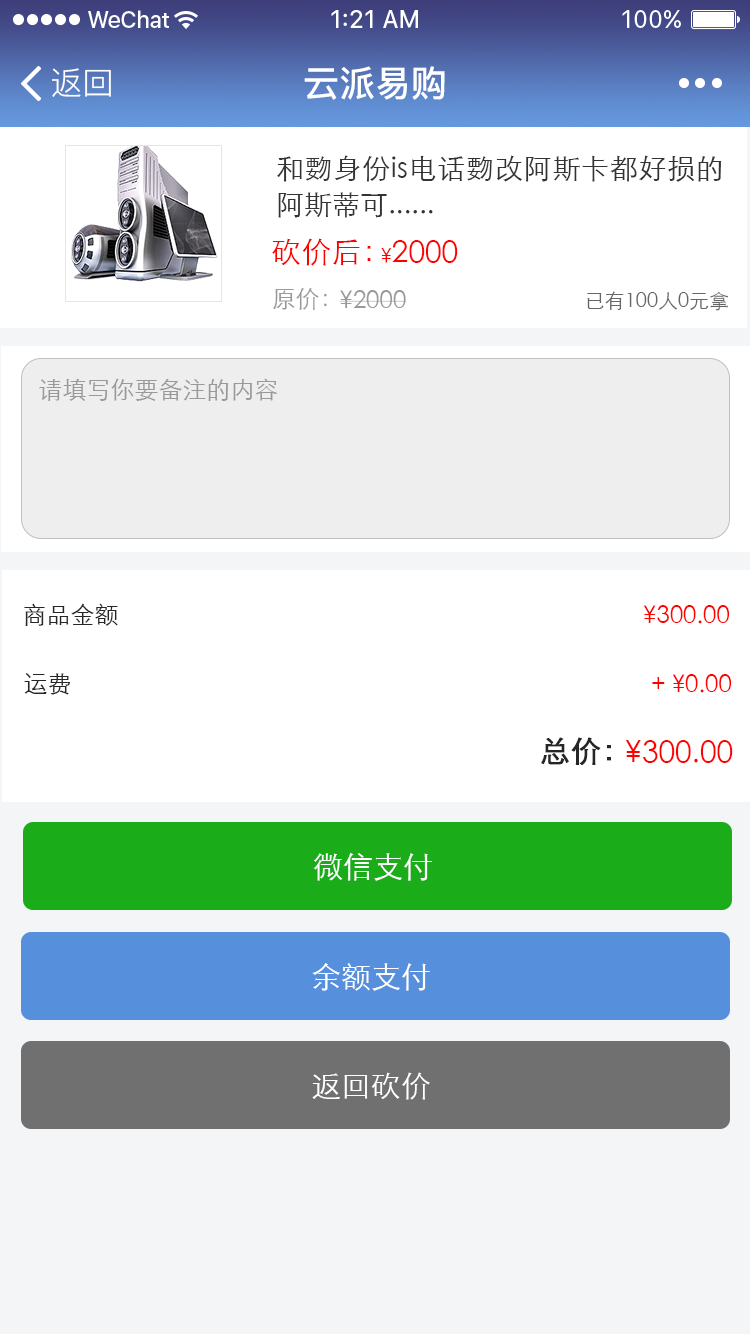
<style>
.page{position:relative;width:750px;height:1334px;background:#ffffff}
.page>*{position:absolute;margin:0}
.t1{font:32px "PingFang-SC-Regular";color:#ffffff}
.t2{font:36px "PingFang-SC-Bold";color:#ffffff}
.t3{font:28px/36px "STXihei";color:#333333}
.t4{font:30px "STXihei";color:#ff0000}
.t5{font:20px "STXihei";color:#ff0000}
.t6{font:24px "STXihei";color:#999999}
.t7{font:20px "STXihei";color:#666666}
.t8{font:24px "STXihei";color:#262626}
.t9{font:24px "STXihei";color:#ff0000}
.t10{font:30px "STXihei";color:#262626;font-weight:bold}
.t11{font:30px "STXihei";color:#ffffff}
</style>
<div class="page">
<p class="t1" style="left:52px;top:68px;width:59px;height:29px">返回</p>
<p class="t2" style="left:304px;top:66px;width:141px;height:34px">云派易购</p>
<p class="t3" style="left:277px;top:155px;width:445px;height:63px;text-align:justify">和覅身份is电话覅改阿斯卡都好损的阿斯蒂可......</p>
<p class="t4" style="left:272px;top:238px;width:99px;height:28px">砍价后：</p>
<p class="t4" style="left:381px;top:240px;width:77px;height:23px"><span class="t5">¥</span>2000</p>
<p class="t6" style="left:273px;top:288px;width:54px;height:22px">原价：</p>
<p class="t6" style="left:339px;top:290px;width:68px;height:18px">¥2000</p>
<p class="t7" style="left:587px;top:291px;width:142px;height:20px">已有100人0元拿</p>
<p class="t6" style="left:39px;top:378px;width:238px;height:23px">请填写你要备注的内容</p>
<p class="t8" style="left:24px;top:603px;width:94px;height:23px">商品金额</p>
<p class="t9" style="left:643px;top:605px;width:87px;height:19px">¥300.00</p>
<p class="t8" style="left:24px;top:673px;width:46px;height:22px">运费</p>
<p class="t9" style="left:652px;top:674px;width:80px;height:19px">+ ¥0.00</p>
<p class="t10" style="left:541px;top:737px;width:70px;height:28px">总价：</p>
<p class="t4" style="left:625px;top:740px;width:108px;height:23px">¥300.00</p>
<p class="t11" style="left:313px;top:853px;width:119px;height:28px">微信支付</p>
<p class="t11" style="left:312px;top:963px;width:118px;height:28px">余额支付</p>
<p class="t11" style="left:312px;top:1072px;width:118px;height:28px">返回砍价</p>
</div>
